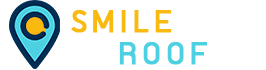
<style>
.page{position:relative;width:266px;height:70px;background:#ffffff}
.page>*{position:absolute;margin:0}
.t1{font:36px/32px "supermarket";letter-spacing:0.135em;color:#f9b90f;font-weight:bold}
.t2{font:36px/32px "supermarket";letter-spacing:0.135em;color:#ffffff;font-weight:bold}
.t3{font:36px/32px "supermarket";letter-spacing:0.135em;color:#4dd0e1;font-weight:bold}
</style>
<div class="page">
<p class="t1" style="left:71px;top:10px;width:182px;height:55px;text-align:center">SMILE<span class="t2">THAI<br></span><span class="t3">ROOF</span></p>
</div>
